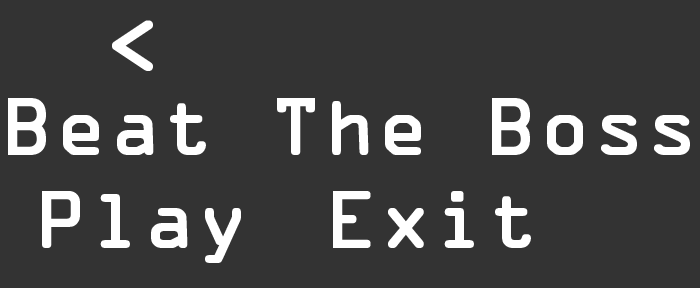
<style>
.page{position:relative;width:700px;height:288px;background:#333333}
.page>*{position:absolute;margin:0}
.t1{font:72px "OCRAStd";color:#ffffff;font-weight:bold}
</style>
<div class="page">
<p class="t1" style="left:112px;top:20px;width:41px;height:51px">&lt;</p>
<p class="t1" style="left:8px;top:98px;width:682px;height:57px">Beat The Boss</p>
<p class="t1" style="left:42px;top:191px;width:199px;height:72px">Play</p>
<p class="t1" style="left:333px;top:191px;width:198px;height:57px">Exit</p>
</div>
